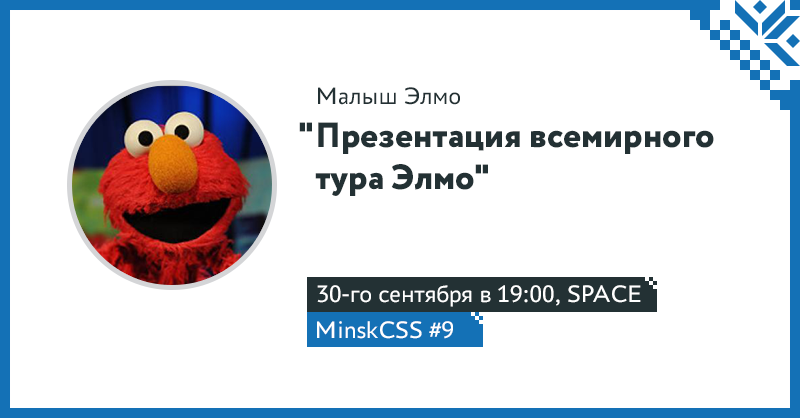
<style>
.page{position:relative;width:800px;height:418px;background:#ffffff}
.page>*{position:absolute;margin:0}
.t1{font:25px "PTAstraSans-Regular";color:#233134}
.t2{font:35px "Circe-ExtraBold";color:#233134}
.t3{font:25px "PTAstraSans-Regular";color:#ffffff}
</style>
<div class="page">
<p class="t1" style="left:318px;top:87px;width:142px;height:18px">Малыш Элмо</p>
<p class="t2" style="left:299px;top:122px;width:13px;height:10px">"</p>
<p class="t2" style="left:315px;top:122px;width:399px;height:74px">Презентация всемирного<br>тура Элмо"</p>
<p class="t3" style="left:317px;top:285px;width:324px;height:22px">30-го сентября в 19:00, SPACE</p>
<p class="t3" style="left:317px;top:321px;width:136px;height:18px">MinskCSS #9</p>
</div>
